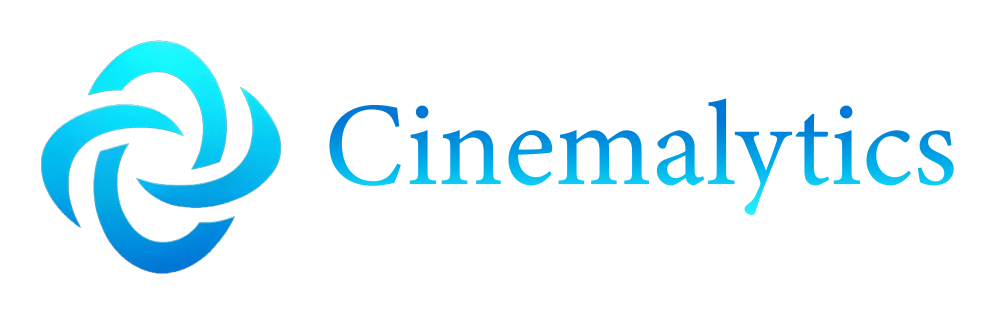
<style>
.page{position:relative;width:1000px;height:314px;background:#ffffff}
.page>*{position:absolute;margin:0}
.t1{font:119px "MinionVariableConcept-Roman"}
</style>
<div class="page">
<p class="t1" style="left:329px;top:98px;width:625px;height:117px">Cinemalytics</p>
</div>
